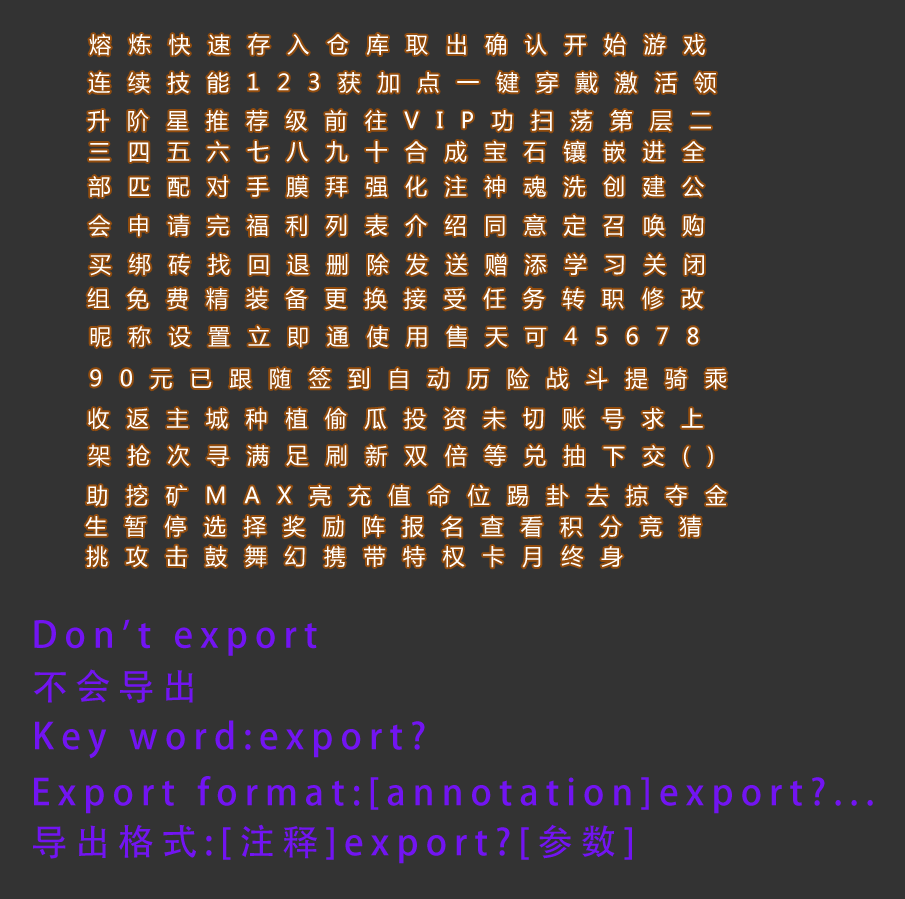
<style>
.page{position:relative;width:905px;height:899px;background:#333333}
.page>*{position:absolute;margin:0}
.t1{font:22px "MicrosoftYaHei";letter-spacing:0.8em;color:#ffffff}
.t2{font:36px "AdobeHeitiStd-Regular";letter-spacing:0.2em;color:#7214f2}
</style>
<div class="page">
<p class="t1" style="left:89px;top:33px;width:616px;height:23px">熔炼快速存入仓库取出确认开始游戏</p>
<p class="t1" style="left:88px;top:71px;width:628px;height:23px">连续技能123获加点一键穿戴激活领</p>
<p class="t1" style="left:87px;top:109px;width:624px;height:23px">升阶星推荐级前往VIP功扫荡第层二</p>
<p class="t1" style="left:89px;top:140px;width:616px;height:23px">三四五六七八九十合成宝石镶嵌进全</p>
<p class="t1" style="left:88px;top:175px;width:616px;height:23px">部匹配对手膜拜强化注神魂洗创建公</p>
<p class="t1" style="left:88px;top:214px;width:616px;height:23px">会申请完福利列表介绍同意定召唤购</p>
<p class="t1" style="left:89px;top:253px;width:615px;height:23px">买绑砖找回退删除发送赠添学习关闭</p>
<p class="t1" style="left:87px;top:287px;width:616px;height:23px">组免费精装备更换接受任务转职修改</p>
<p class="t1" style="left:90px;top:325px;width:609px;height:23px">昵称设置立即通使用售天可45678</p>
<p class="t1" style="left:90px;top:368px;width:637px;height:22px">90元已跟随签到自动历险战斗提骑乘</p>
<p class="t1" style="left:88px;top:407px;width:615px;height:23px">收返主城种植偷瓜投资未切账号求上</p>
<p class="t1" style="left:88px;top:444px;width:625px;height:23px">架抢次寻满足刷新双倍等兑抽下交()</p>
<p class="t1" style="left:86px;top:484px;width:641px;height:23px">助挖矿MAX亮充值命位踢卦去掠夺金</p>
<p class="t1" style="left:85px;top:515px;width:616px;height:23px">生暂停选择奖励阵报名查看积分竞猜</p>
<p class="t1" style="left:86px;top:545px;width:537px;height:23px">挑攻击鼓舞幻携带特权卡月终身</p>
<p class="t2" style="left:34px;top:619px;width:283px;height:37px">Don't export</p>
<p class="t2" style="left:33px;top:669px;width:161px;height:34px">不会导出</p>
<p class="t2" style="left:35px;top:720px;width:390px;height:39px">Key word:export?</p>
<p class="t2" style="left:34px;top:776px;width:839px;height:38px">Export format:[annotation]export?...</p>
<p class="t2" style="left:33px;top:824px;width:599px;height:40px">导出格式:[注释]export?[参数]</p>
</div>
